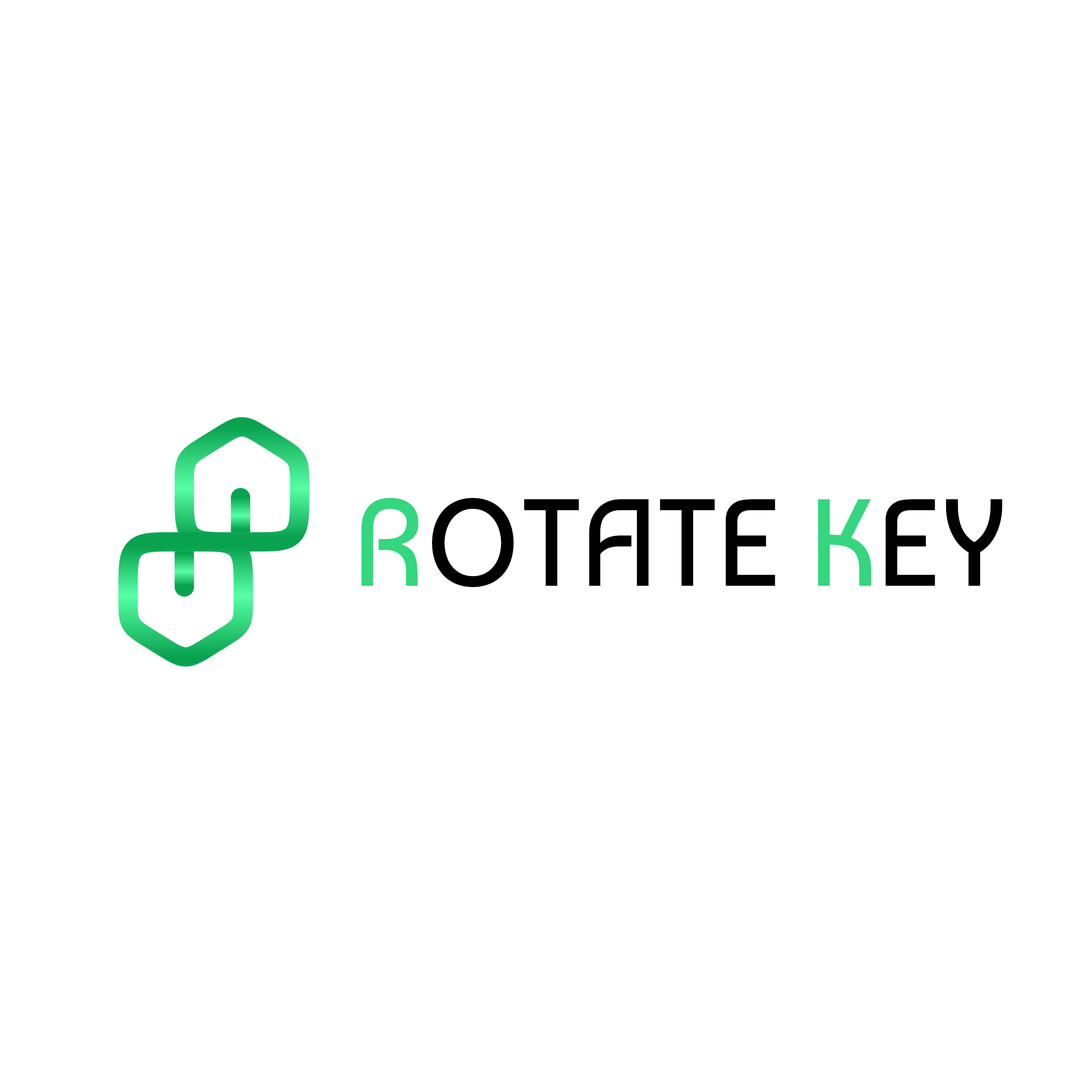
<style>
.page{position:relative;width:1092px;height:1092px;background:#ffffff}
.page>*{position:absolute;margin:0}
.t1{font:31px "Baumans-Regular";color:#000000}
.t2{font:31px "Baumans-Regular";color:#34d67f}
</style>
<div class="page">
<p class="t1" style="left:361px;top:498px;width:641px;height:89px"><span class="t2">R</span>OTATE <span class="t2">K</span>EY</p>
</div>
